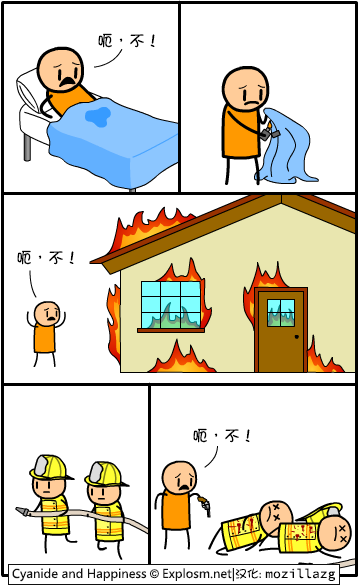
<style>
.page{position:relative;width:359px;height:586px;background:#ffffff}
.page>*{position:absolute;margin:0}
.t1{font:16px "DFGirl";color:#000000}
</style>
<div class="page">
<p class="t1" style="left:98px;top:33px;width:57px;height:15px">呃，不！</p>
<p class="t1" style="left:17px;top:250px;width:57px;height:15px">呃，不！</p>
<p class="t1" style="left:193px;top:428px;width:57px;height:15px">呃，不！</p>
</div>
